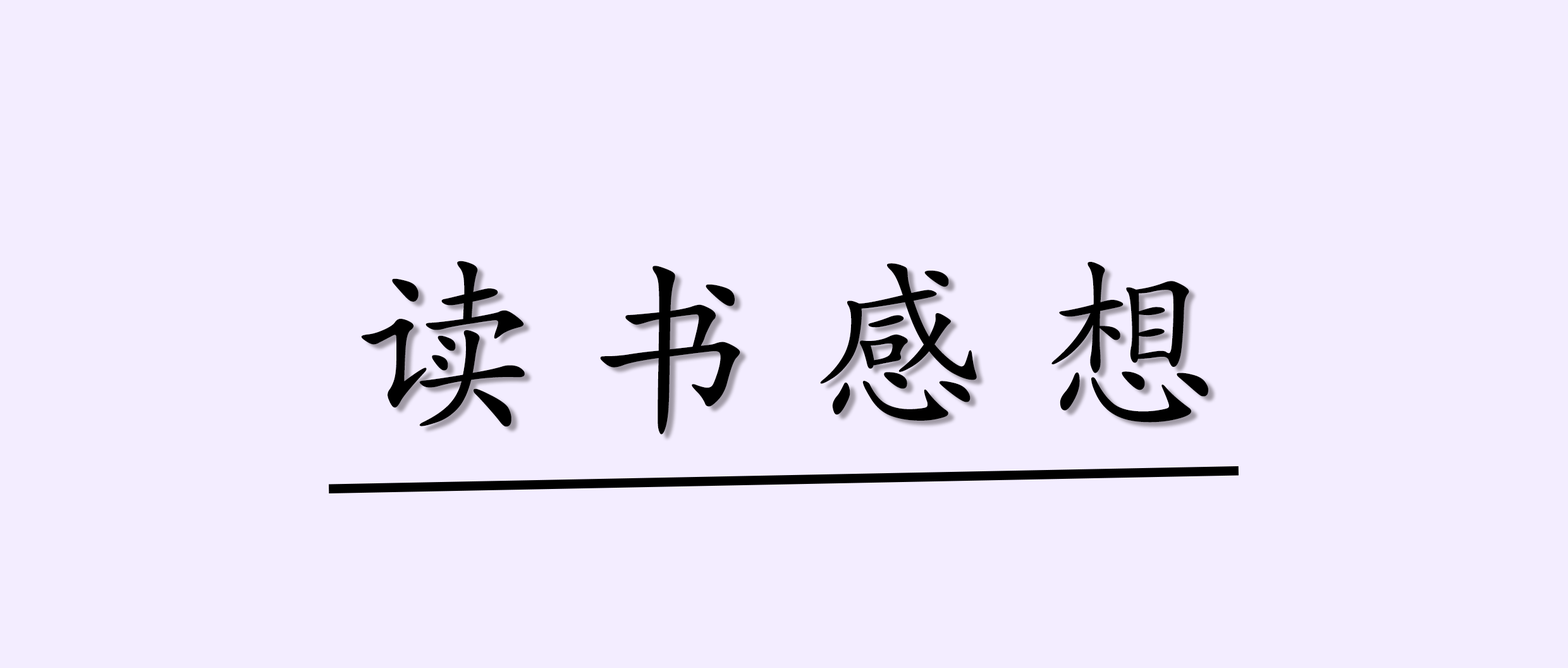
<style>
.page{position:relative;width:1568px;height:668px;background:#f3edff}
.page>*{position:absolute;margin:0}
.t1{font:189.7px "STKaiti";letter-spacing:0.2em;color:#000000}
</style>
<div class="page">
<p class="t1" style="left:361px;top:260px;width:847px;height:174px">读书感想</p>
</div>
